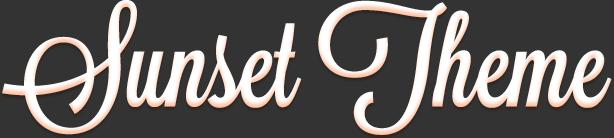
<style>
.page{position:relative;width:614px;height:138px;background:#333333}
.page>*{position:absolute;margin:0}
.t1{font:120px "Lavanderia-Sturdy";color:#ffffff}
</style>
<div class="page">
<p class="t1" style="left:2px;top:0px;width:610px;height:135px">Sunset Theme</p>
</div>
